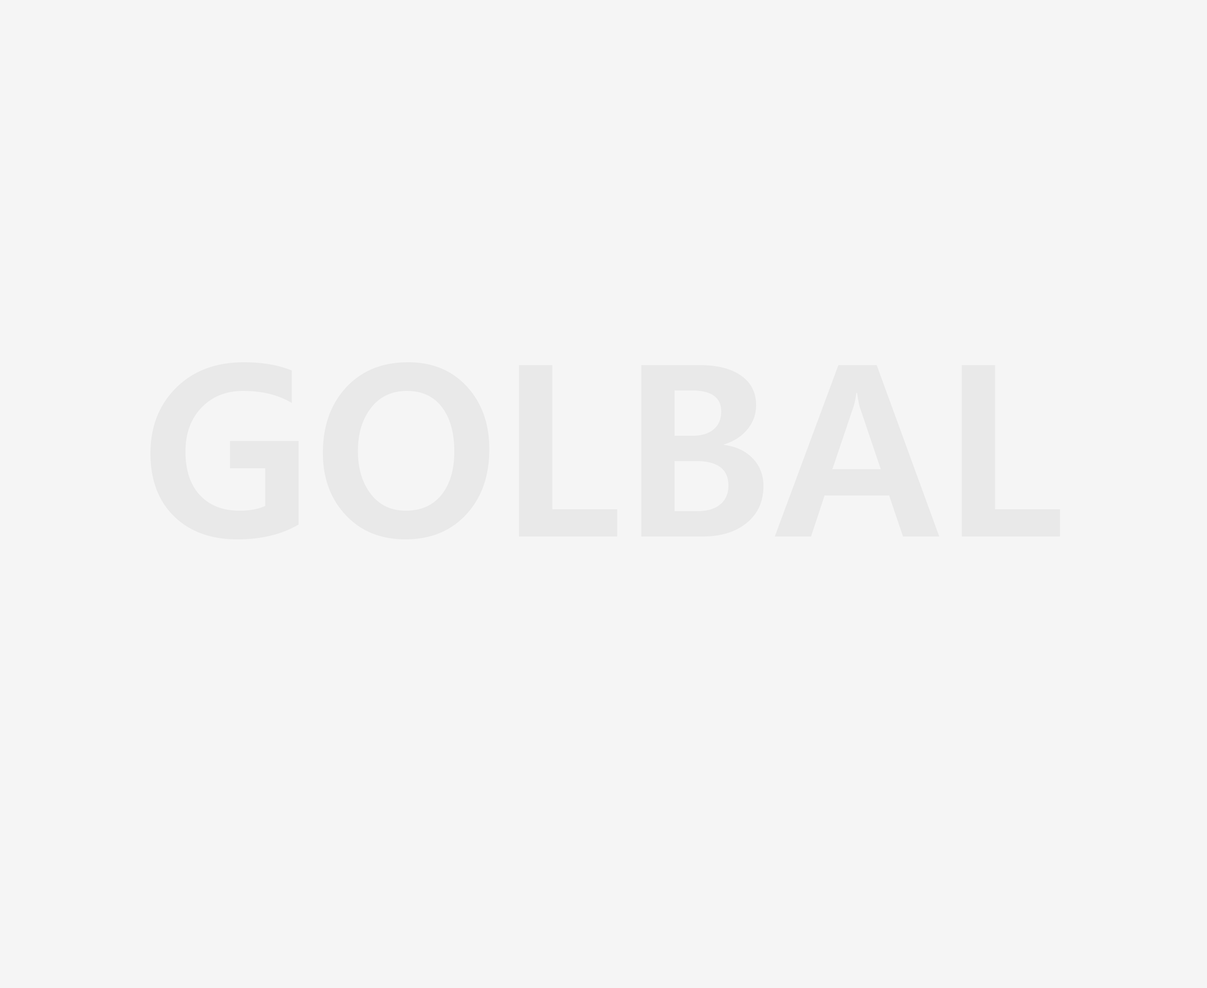
<style>
.page{position:relative;width:1207px;height:988px;background:#f5f5f5}
.page>*{position:absolute;margin:0}
.t1{font:238.7px "MalgunGothicBold";color:#e9e9e9}
</style>
<div class="page">
<p class="t1" style="left:150px;top:362px;width:910px;height:178px">GOLBAL</p>
</div>
